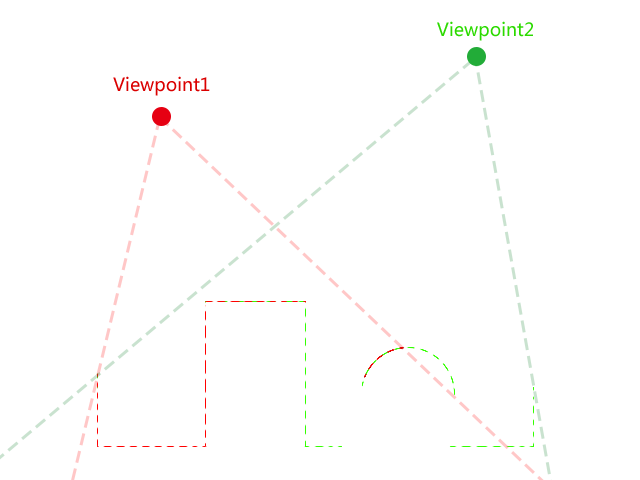
<style>
.page{position:relative;width:640px;height:480px;background:#ffffff}
.page>*{position:absolute;margin:0}
.t1{font:18px "MicrosoftYaHei";color:#2cda00}
.t2{font:18px "MicrosoftYaHei";color:#da0000}
</style>
<div class="page">
<p class="t1" style="left:437px;top:21px;width:96px;height:20px">Viewpoint2</p>
<p class="t2" style="left:113px;top:76px;width:97px;height:20px">Viewpoint1</p>
</div>
